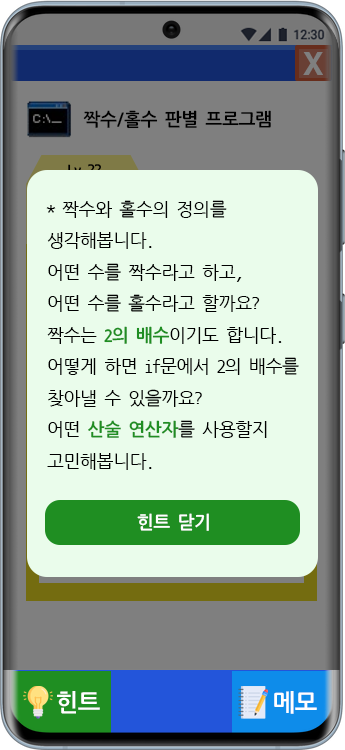
<style>
.page{position:relative;width:345px;height:750px;background:#eafceb}
.page>*{position:absolute;margin:0}
.t1{font:30px "H2gtrE";color:#7f7f7f}
.t2{font:18px "NanumGothicCoding-Bold";letter-spacing:-0.08em;color:#000000}
.t3{font:18px "NanumGothicCoding";letter-spacing:-0.08em;color:#000000}
.t4{font:18px "NanumGothicCoding-Bold";letter-spacing:-0.08em;color:#1f8e22}
.t5{font:18px "NanumGothicCoding-Bold";letter-spacing:-0.08em;color:#ffffff}
.t6{font:24px "NanumGothicCoding-Bold";letter-spacing:-0.08em;color:#ffffff}
</style>
<div class="page">
<p class="t1" style="left:303px;top:52px;width:20px;height:23px">X</p>
<p class="t2" style="left:83px;top:110px;width:188px;height:19px">짝수/홀수 판별 프로그램</p>
<p class="t3" style="left:46px;top:200px;width:253px;height:270px">* 짝수와 홀수의 정의를<br>생각해봅니다.<br>어떤 수를 짝수라고 하고,<br>어떤 수를 홀수라고 할까요?<br>짝수는 <span class="t4">2의 배수</span>이기도 합니다.<br>어떻게 하면 if문에서 2의 배수를<br>찾아낼 수 있을까요?<br>어떤 <span class="t4">산술 연산자</span>를 사용할지<br>고민해봅니다.</p>
<p class="t5" style="left:137px;top:513px;width:72px;height:18px">힌트 닫기</p>
<p class="t6" style="left:57px;top:691px;width:43px;height:23px">힌트</p>
<p class="t6" style="left:274px;top:691px;width:43px;height:23px">메모</p>
</div>
